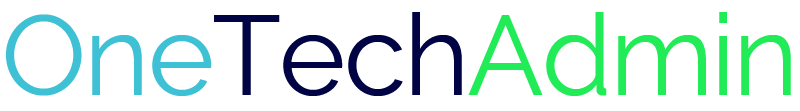
<style>
.page{position:relative;width:800px;height:111px;background:#ffffff}
.page>*{position:absolute;margin:0}
.t1{font:113.2px "Raleway";letter-spacing:-0.02em;color:#21eb57}
.t2{font:113.2px "Raleway";letter-spacing:-0.02em;color:#3ec1d5}
.t3{font:113.2px "Raleway";letter-spacing:-0.02em;color:#000444}
</style>
<div class="page">
<p class="t1" style="left:6px;top:12px;width:785px;height:84px"><span class="t2">One</span><span class="t3">Tech</span>Admin</p>
</div>
